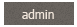
<style>
.page{position:relative;width:77px;height:27px;background:#69645f}
.page>*{position:absolute;margin:0}
.t1{font:12px "Tahoma";color:#f1e6db}
</style>
<div class="page">
<p class="t1" style="left:22px;top:9px;width:32px;height:10px">admin</p>
</div>
